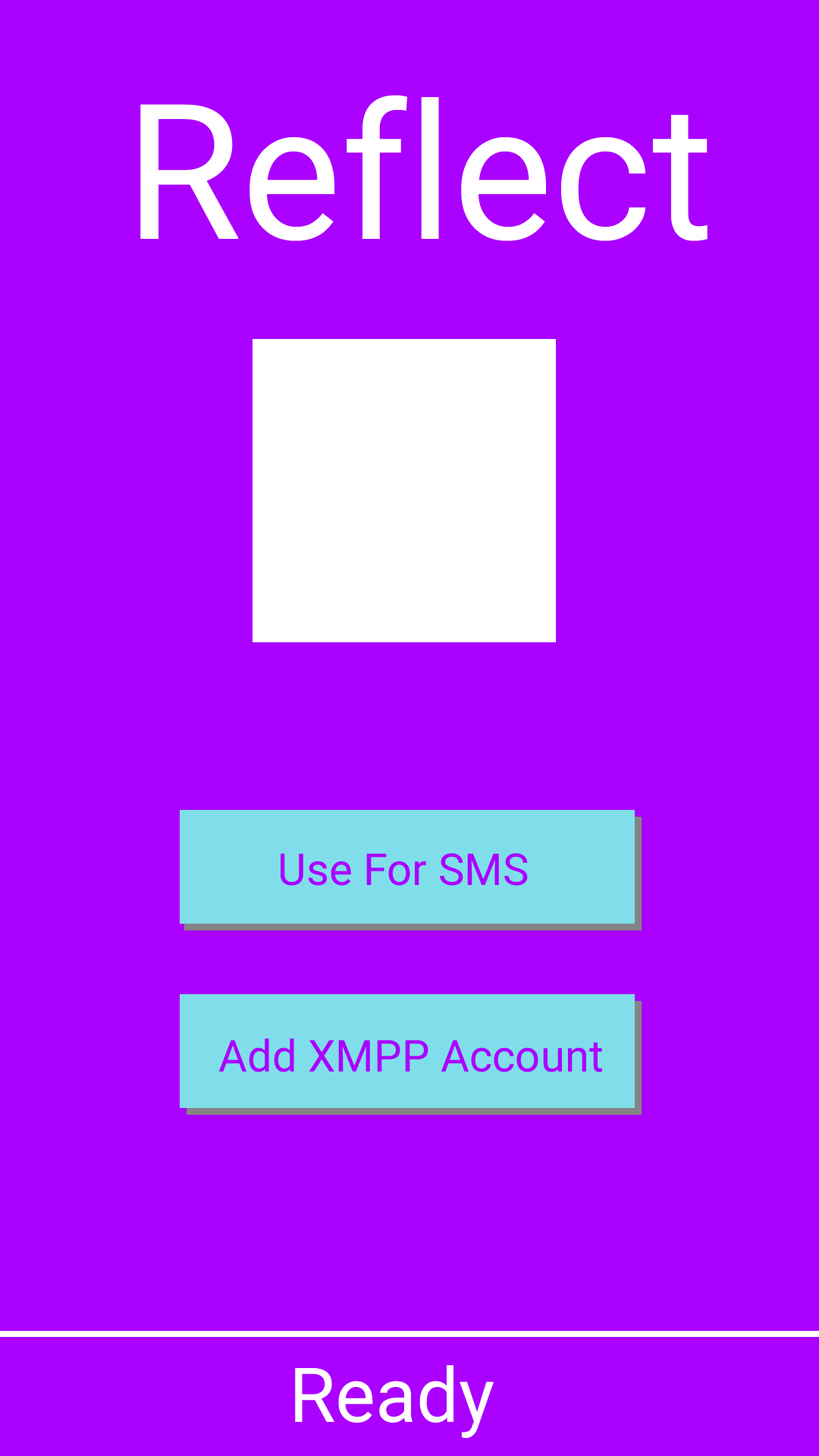
<style>
.page{position:relative;width:819px;height:1456px;background:#aa00ff}
.page>*{position:absolute;margin:0}
.t1{font:188.9px "Roboto-Regular";color:#ffffff}
.t2{font:44.1px "Roboto-Regular";color:#aa00ff}
.t3{font:75.5px "Roboto-Regular";color:#ffffff}
</style>
<div class="page">
<p class="t1" style="left:140px;top:95px;width:568px;height:146px">Reflect</p>
<p class="t2" style="left:281px;top:853px;width:247px;height:33px">Use For SMS</p>
<p class="t2" style="left:218px;top:1038px;width:384px;height:34px">Add XMPP Account</p>
<p class="t3" style="left:295px;top:1365px;width:199px;height:74px">Ready</p>
</div>
